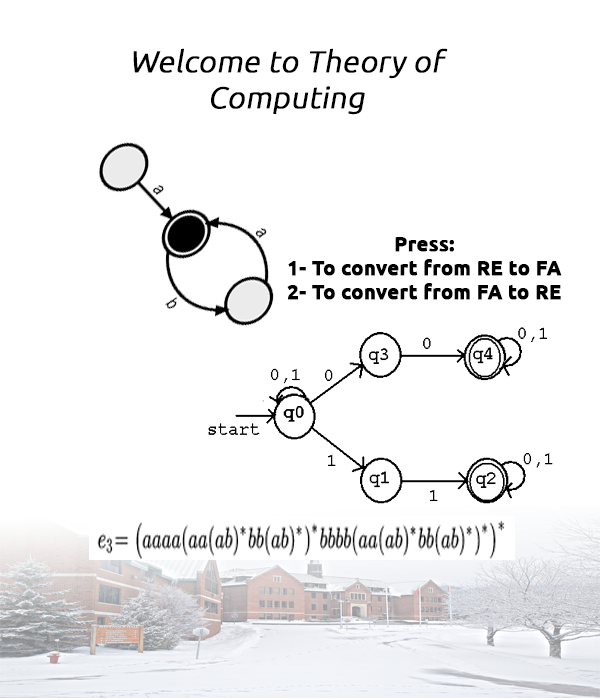
<style>
.page{position:relative;width:600px;height:700px;background:#ffffff}
.page>*{position:absolute;margin:0}
.t1{font:30px "Ubuntu-Light";color:#000000;font-weight:bold;font-style:italic}
.t2{font:20px "Ubuntu-Bold";color:#000000;font-weight:bold}
</style>
<div class="page">
<p class="t1" style="left:133px;top:48px;width:315px;height:67px;text-align:center">Welcome to Theory of Computing</p>
<p class="t2" style="left:287px;top:237px;width:275px;height:63px;text-align:center">Press:<br>1- To convert from RE to FA<br>2- To convert from FA to RE</p>
</div>
